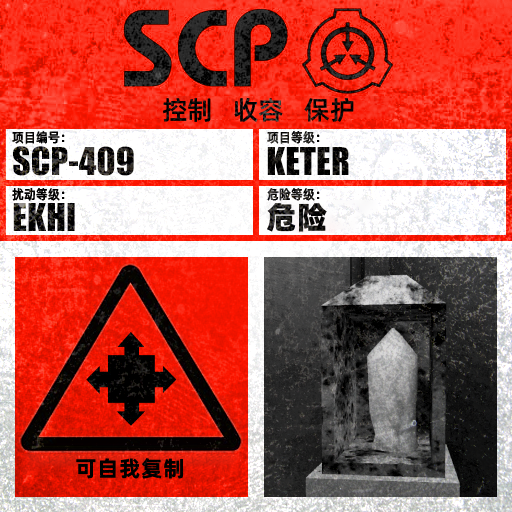
<style>
.page{position:relative;width:512px;height:512px}
.page>*{position:absolute;margin:0}
.t1{font:26px "AlibabaPuHuiTiM";color:#000000}
.t2{font:13.3px "AlibabaPuHuiTiM";letter-spacing:0.02em;color:#000000;scale:0.9 1}
.t3{font:13.3px "AlibabaPuHuiTiM";letter-spacing:0.02em;scale:0.9 1}
.t4{font:30.3px "AlibabaPuHuiTiH";letter-spacing:0.02em}
.t5{font:22px "AlibabaPuHuiTiB";letter-spacing:0.02em;color:#000000}
</style>
<div class="page">
<p class="t1" style="left:163px;top:97px;width:191px;height:26px">控制   收容   保护</p>
<p class="t2" style="left:12px;top:131px;width:53px;height:13px">项目编号：</p>
<p class="t3" style="left:267px;top:131px;width:53px;height:13px">项目等级：</p>
<p class="t2" style="left:12px;top:188px;width:53px;height:13px">扰动等级：</p>
<p class="t3" style="left:267px;top:188px;width:53px;height:13px">危险等级：</p>
<p class="t4" style="left:267px;top:203px;width:60px;height:29px">危险</p>
<p class="t5" style="left:76px;top:458px;width:107px;height:21px">可自我复制</p>
</div>
